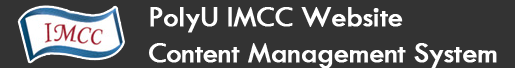
<style>
.page{position:relative;width:515px;height:68px;background:#333333}
.page>*{position:absolute;margin:0}
.t1{font:30px/36px "TwCenMT-Regular";letter-spacing:-0.025em;color:#ffffff;font-weight:bold}
</style>
<div class="page">
<p class="t1" style="left:149px;top:7px;width:348px;height:62px">PolyU IMCC Website<br>Content Management System</p>
</div>
